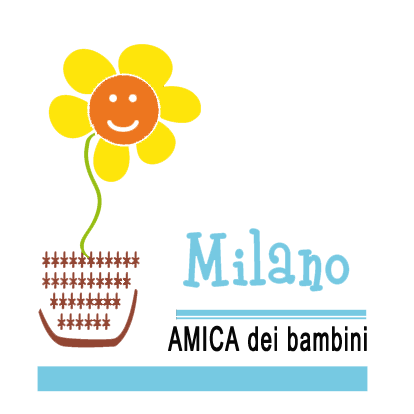
<style>
.page{position:relative;width:414px;height:414px;background:#ffffff}
.page>*{position:absolute;margin:0}
.t1{font:33.3px "ArialMT";letter-spacing:0.06em;color:#070707;font-weight:bold;scale:0.6 1}
</style>
<div class="page">
<p class="t1" style="left:168px;top:325px;width:199px;height:27px">AMICA dei bambini</p>
</div>
